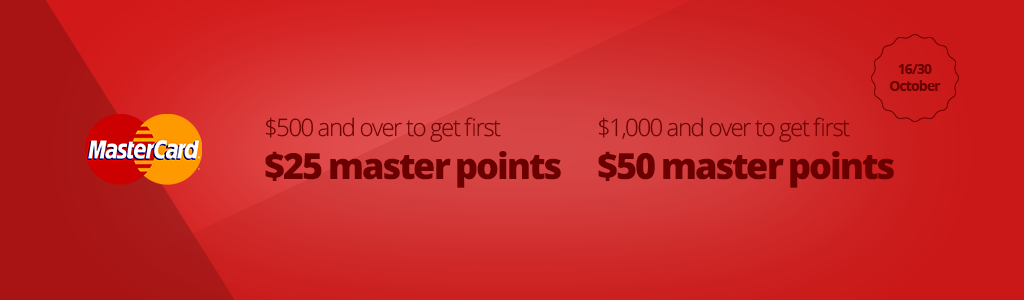
<style>
.page{position:relative;width:1024px;height:300px}
.page>*{position:absolute;margin:0}
.t1{font:14px "OpenSans-Bold";letter-spacing:-0.06em;color:#6a0000}
.t2{font:24px "OpenSans-Light";letter-spacing:-0.06em;color:#6a0000}
.t3{font:36px "OpenSans-Extrabold";letter-spacing:-0.06em;color:#6a0000}
</style>
<div class="page">
<p class="t1" style="left:890px;top:64px;width:51px;height:27px;text-align:center">16/30<br>October</p>
<p class="t2" style="left:265px;top:117px;width:296px;height:71px">$500 and over to get first<br><span class="t3">$25 master points</span></p>
<p class="t2" style="left:598px;top:117px;width:296px;height:71px">$1,000 and over to get first<br><span class="t3">$50 master points</span></p>
</div>
